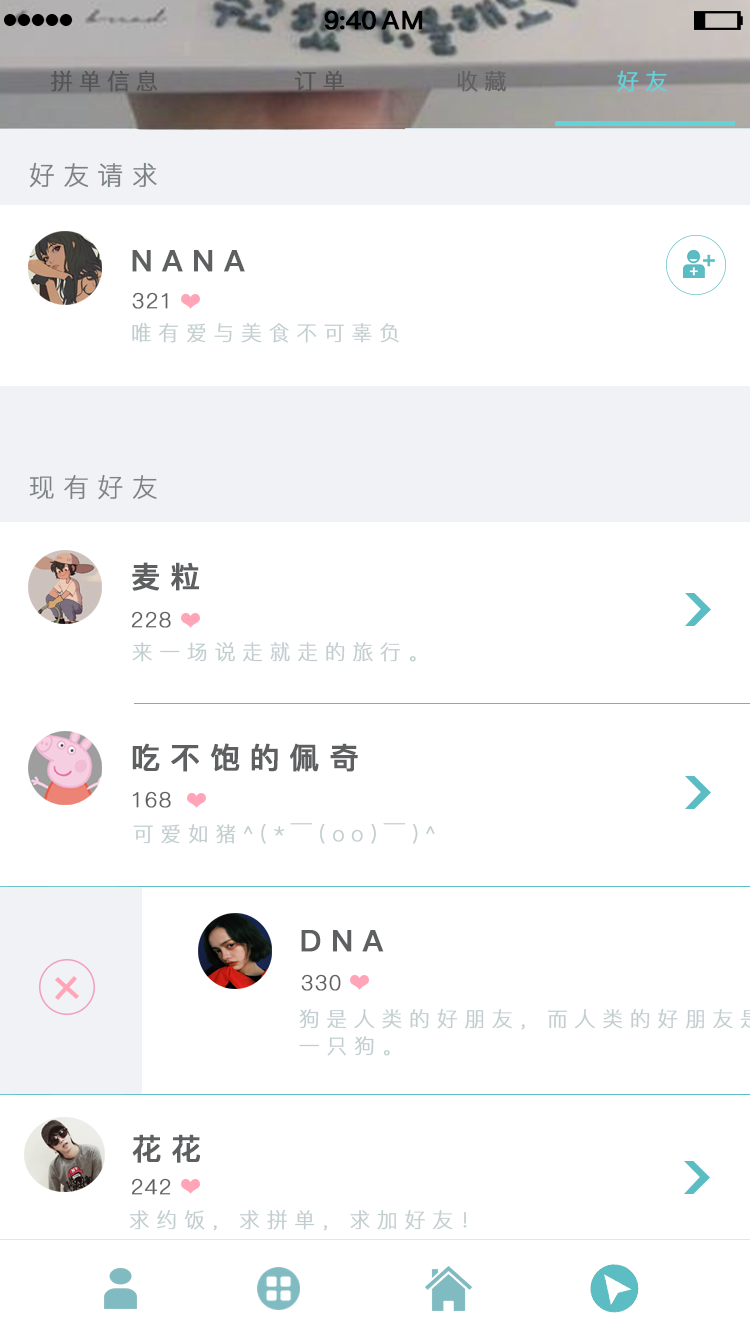
<style>
.page{position:relative;width:750px;height:1334px;background:#ffffff}
.page>*{position:absolute;margin:0}
.t1{font:25.4px "PingFang-SC-Bold";letter-spacing:-0.028em;color:#000000;font-weight:bold}
.t2{font:25.4px "PingFang-SC-Bold";letter-spacing:0.052em;color:#000000;font-weight:bold}
.t3{font:22.2px "PingFang-SC-Regular";letter-spacing:0.252em;color:#545454;font-weight:bold}
.t4{font:22.2px "PingFang-SC-Regular";letter-spacing:0.252em;color:#616161;font-weight:bold}
.t5{font:22.2px "PingFang-SC-Regular";letter-spacing:0.252em;color:#64d2d9;font-weight:bold}
.t6{font:25.6px "PingFang-SC-Light";letter-spacing:0.314em;color:#7b8286;font-weight:bold}
.t7{font:29.6px "PingFang-SC-Bold";letter-spacing:0.314em;color:#5d5f60;font-weight:bold}
.t8{font:20.6px "PingFang-SC-Light";letter-spacing:0.054em;color:#5d5f60;font-weight:bold}
.t9{font:20.6px "PingFang-SC-Light";letter-spacing:0.314em;color:#c2cdcf;font-weight:bold}
</style>
<div class="page">
<p class="t1" style="left:324px;top:10px;width:52px;height:20px">9:40</p>
<p class="t2" style="left:381px;top:10px;width:42px;height:20px">AM</p>
<p class="t3" style="left:50px;top:70px;width:108px;height:22px">拼单信息</p>
<p class="t3" style="left:294px;top:70px;width:51px;height:22px">订单</p>
<p class="t4" style="left:457px;top:70px;width:49px;height:22px">收藏</p>
<p class="t5" style="left:617px;top:70px;width:50px;height:22px">好友</p>
<p class="t6" style="left:29px;top:162px;width:128px;height:26px">好友请求</p>
<p class="t7" style="left:132px;top:250px;width:113px;height:22px">NANA</p>
<p class="t8" style="left:132px;top:292px;width:36px;height:17px">321</p>
<p class="t9" style="left:132px;top:323px;width:267px;height:20px">唯有爱与美食不可辜负</p>
<p class="t6" style="left:29px;top:474px;width:128px;height:26px">现有好友</p>
<p class="t7" style="left:132px;top:562px;width:67px;height:29px">麦粒</p>
<p class="t8" style="left:131px;top:611px;width:40px;height:17px">228</p>
<p class="t9" style="left:132px;top:642px;width:284px;height:20px">来一场说走就走的旅行。</p>
<p class="t7" style="left:132px;top:743px;width:226px;height:29px">吃不饱的佩奇</p>
<p class="t8" style="left:132px;top:791px;width:39px;height:17px">168</p>
<p class="t9" style="left:133px;top:823px;width:302px;height:21px">可爱如猪^(*￣(oo)￣)^</p>
<p class="t7" style="left:301px;top:930px;width:83px;height:22px">DNA</p>
<p class="t8" style="left:301px;top:974px;width:40px;height:17px">330</p>
<p class="t7" style="left:132px;top:1134px;width:68px;height:29px">花花</p>
<p class="t8" style="left:131px;top:1178px;width:40px;height:17px">242</p>
<p class="t9" style="left:129px;top:1209px;width:338px;height:22px">求约饭，求拼单，求加好友！</p>
</div>
